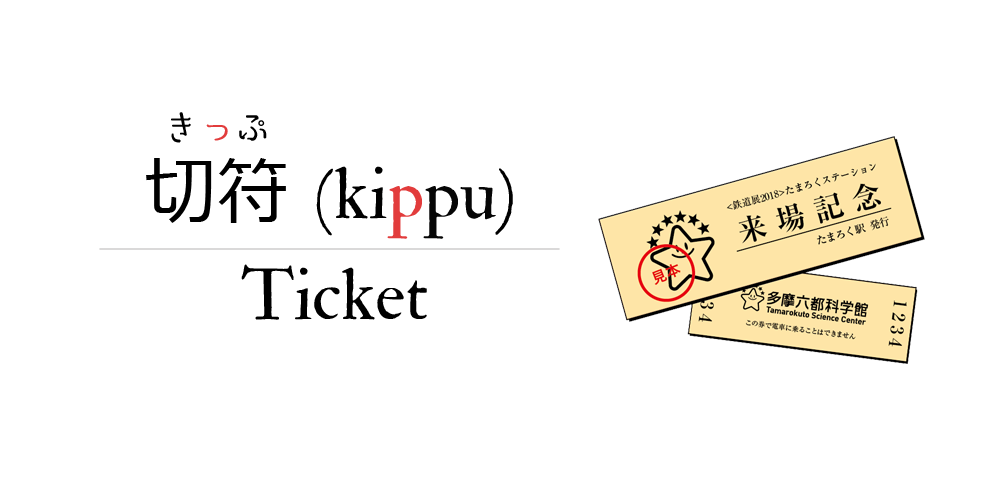
<style>
.page{position:relative;width:1000px;height:500px;background:#ffffff}
.page>*{position:absolute;margin:0}
.t1{font:36px "HimeminShirayuki-mini";color:#000000}
.t2{font:36px "HimeminShirayuki-mini";color:#e23c3c}
.t3{font:72px "IM_FELL_Double_Pica_Roman";color:#000000}
.t4{font:72px "Meiryo";color:#000000}
.t5{font:72px "IM_FELL_Double_Pica_Roman";color:#e23c3c}
.t6{font:72px "IM_FELL_Double_Pica_Roman";color:#060606}
</style>
<div class="page">
<p class="t1" style="left:171px;top:112px;width:96px;height:31px">き<span class="t2">っ</span>ぷ</p>
<p class="t3" style="left:146px;top:158px;width:367px;height:81px"><span class="t4">切符 </span>(ki<span class="t5">p</span><span class="t6">pu</span>)</p>
<p class="t3" style="left:241px;top:264px;width:186px;height:56px">Ticket</p>
</div>
